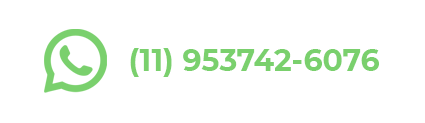
<style>
.page{position:relative;width:425px;height:123px;background:#ffffff}
.page>*{position:absolute;margin:0}
.t1{font:30px "Montserrat-Bold";color:#7ad06d}
</style>
<div class="page">
<p class="t1" style="left:130px;top:48px;width:249px;height:29px">(11) 953742-6076</p>
</div>
